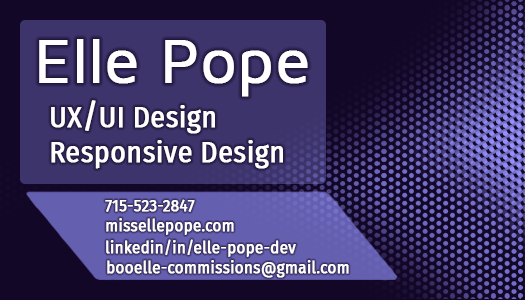
<style>
.page{position:relative;width:525px;height:300px;background:#130727}
.page>*{position:absolute;margin:0}
.t1{font:62.5px "MavenPro-Regular";color:#ffffff;font-weight:bold}
.t2{font:29.2px "FiraSansCondensed-Regular";color:#ffffff;font-weight:bold}
.t3{font:33.3px "FiraSansCondensed-Regular";color:#ffffff;font-weight:bold}
.t4{font:29.2px "MavenPro-Regular";color:#d7d6f2;font-weight:bold}
.t5{font:16.7px "FiraSansCondensed-Regular";color:#ffffff;font-weight:bold}
</style>
<div class="page">
<p class="t1" style="left:39px;top:39px;width:269px;height:58px">Elle Pope</p>
<p class="t2" style="left:51px;top:100px;width:164px;height:34px">UX<span class="t3">/</span>UI Design</p>
<p class="t2" style="left:51px;top:140px;width:232px;height:29px"><span class="t4"><br></span>Responsive Design</p>
<p class="t5" style="left:105px;top:199px;width:90px;height:13px">715-523-2847</p>
<p class="t5" style="left:106px;top:218px;width:128px;height:17px">missellepope.com</p>
<p class="t5" style="left:106px;top:239px;width:190px;height:18px">linkedin/in/elle-pope-dev</p>
<p class="t5" style="left:107px;top:260px;width:242px;height:18px">booelle-commissions@gmail.com</p>
</div>
